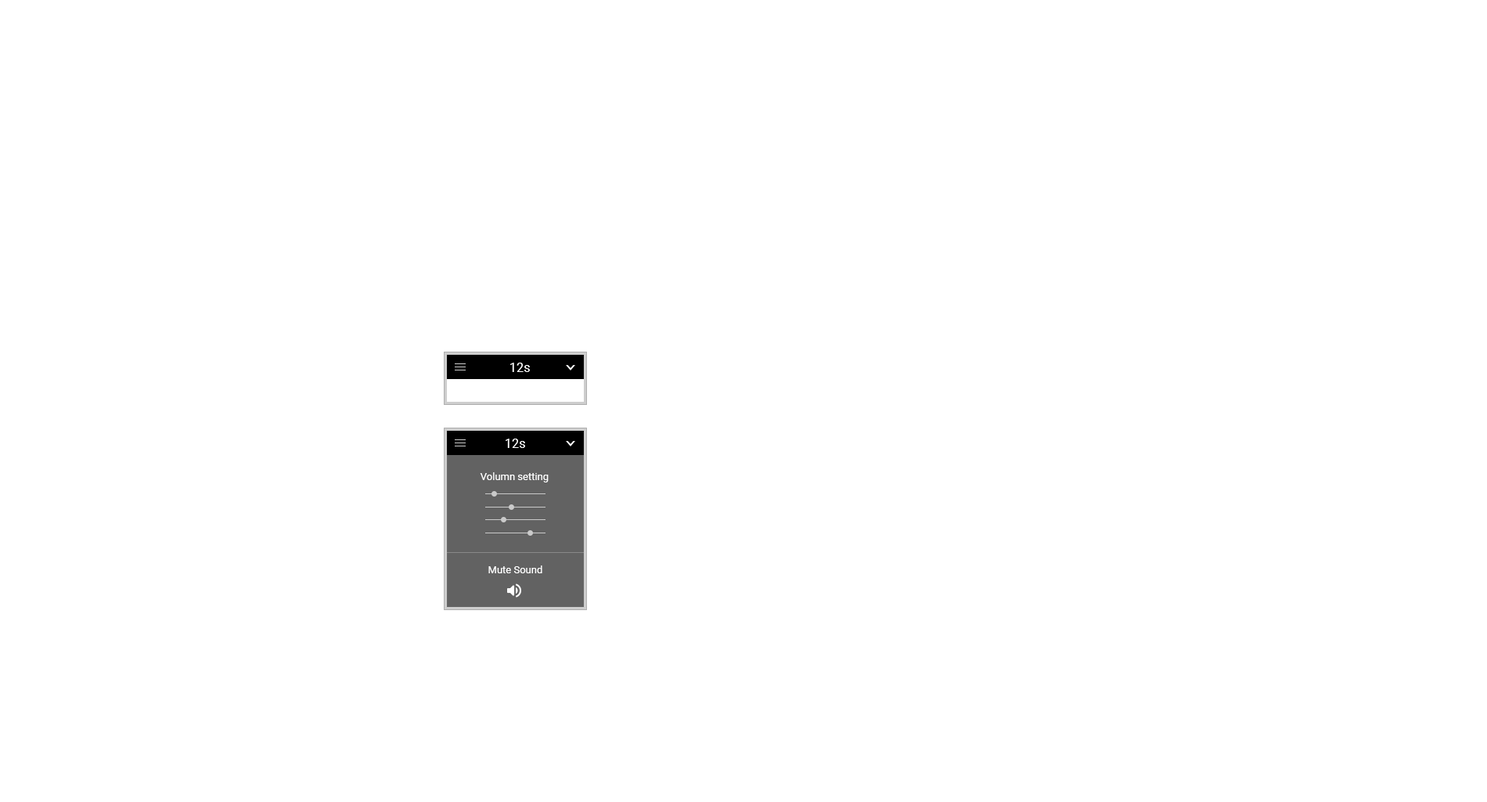
<style>
.page{position:relative;width:1487px;height:802px;background:#ffffff}
.page>*{position:absolute;margin:0}
.t1{font:13.6px "Roboto-Regular";color:#ffffff;scale:0.95 1}
.t2{font:10.2px "Roboto-Regular";color:#ffffff}
</style>
<div class="page">
<p class="t1" style="left:510px;top:362px;width:20px;height:10px">12s</p>
<p class="t1" style="left:506px;top:438px;width:19px;height:10px">12s</p>
<p class="t2" style="left:480px;top:472px;width:69px;height:10px">Volumn setting</p>
<p class="t2" style="left:489px;top:565px;width:54px;height:8px">Mute Sound</p>
</div>
